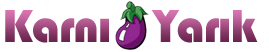
<style>
.page{position:relative;width:269px;height:52px;background:#ffffff}
.page>*{position:absolute;margin:0}
.t1{font:48px "Bauhaus93";letter-spacing:-0.025em}
</style>
<div class="page">
<p class="t1" style="left:5px;top:10px;width:253px;height:33px">Karnı    Yarık</p>
</div>
